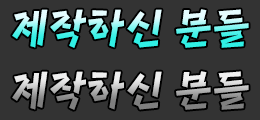
<style>
.page{position:relative;width:260px;height:120px;background:#333333}
.page>*{position:absolute;margin:0}
.t1{font:40px "MapoHongdaeFreedom"}
</style>
<div class="page">
<p class="t1" style="left:12px;top:9px;width:237px;height:39px">제작하신 분들</p>
<p class="t1" style="left:12px;top:71px;width:237px;height:39px">제작하신 분들</p>
</div>
